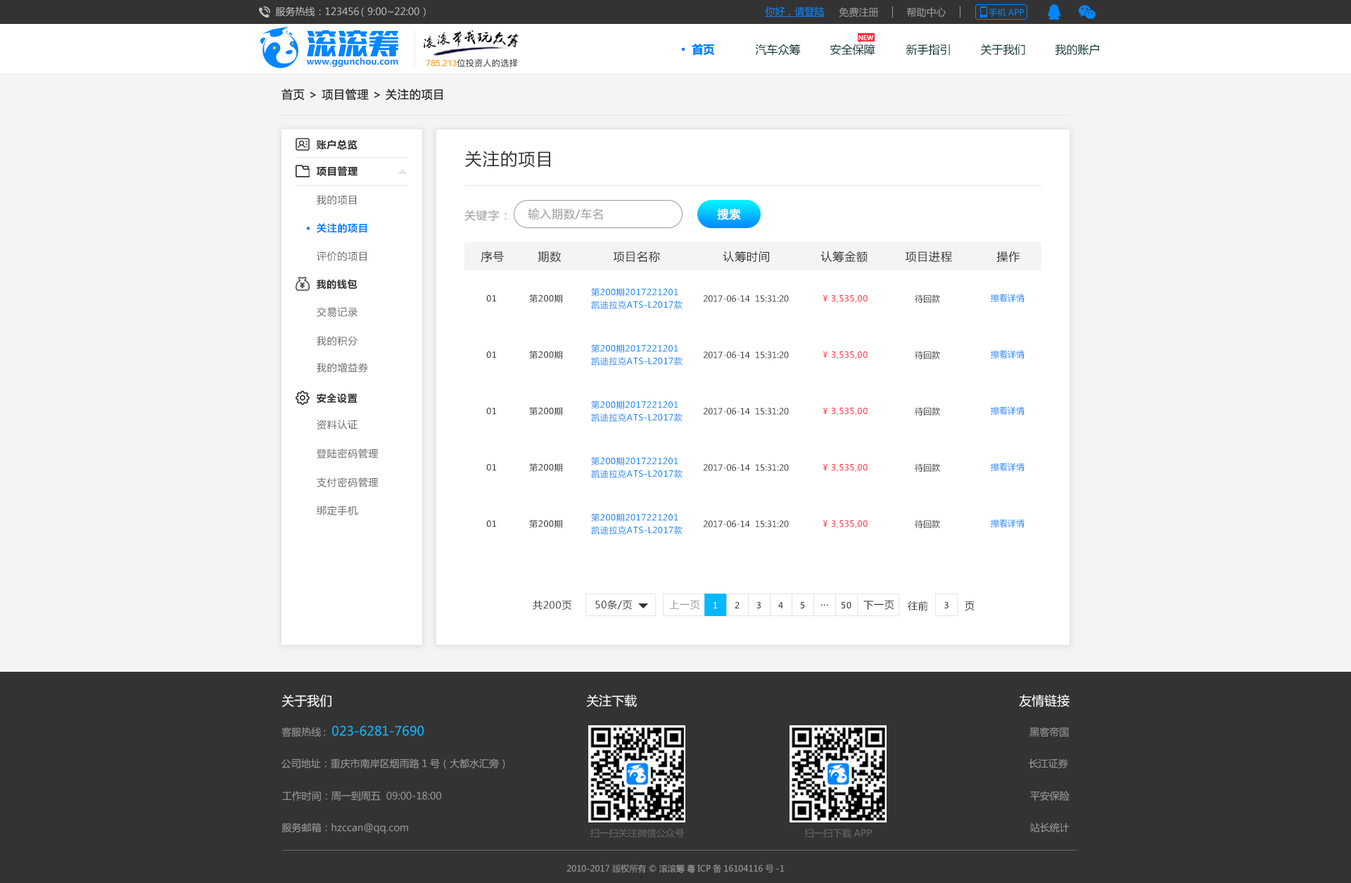
<style>
.page{position:relative;width:1351px;height:883px;background:#ffffff}
.page>*{position:absolute;margin:0}
.t1{font:9.9px "MicrosoftYaHei";color:#c4c4c4}
.t2{font:9.9px "MicrosoftYaHei";color:#0386ff;text-decoration:underline}
.t3{font:9.9px "MicrosoftYaHei";color:#999999}
.t4{font:8.4px "MicrosoftYaHei";color:#0386ff}
.t5{font:6.3px "MicrosoftYaHei";color:#ffffff}
.t6{font:11.3px "MicrosoftYaHei-Bold";color:#0386ff}
.t7{font:11.3px "MicrosoftYaHei";color:#033333}
.t8{font:8.8px "MicrosoftYaHei-Bold";color:#0386ff}
.t9{font:11.3px "MicrosoftYaHei";letter-spacing:0.05em;color:#333333}
.t10{font:9.9px "MicrosoftYaHei-Bold";letter-spacing:0.05em;color:#333333}
.t11{font:16.9px "MicrosoftYaHei";letter-spacing:0.05em;color:#333333}
.t12{font:9.9px "MicrosoftYaHei";letter-spacing:0.05em;color:#666666}
.t13{font:11.3px "MicrosoftYaHei";letter-spacing:0.05em;color:#999999}
.t14{font:11.3px "MicrosoftYaHei";letter-spacing:0.05em;color:#ffffff}
.t15{font:9.9px "MicrosoftYaHei-Bold";letter-spacing:0.05em;color:#0386ff}
.t16{font:8.4px/12.7px "MicrosoftYaHei";letter-spacing:0.05em;color:#0386ff}
.t17{font:8.4px "MicrosoftYaHei";letter-spacing:0.05em;color:#333333}
.t18{font:8.4px "MicrosoftYaHei";color:#333333}
.t19{font:8.4px "MicrosoftYaHei";letter-spacing:0.05em;color:#ff3140}
.t20{font:9.9px "MicrosoftYaHei";letter-spacing:0.05em;color:#333333}
.t21{font:9.9px "MicrosoftYaHei";letter-spacing:0.05em;color:#999999}
.t22{font:8.4px "MicrosoftYaHei";letter-spacing:0.05em;color:#ffffff}
.t23{font:8.4px "MicrosoftYaHei";letter-spacing:0.05em}
.t24{font:12.7px "MicrosoftYaHei";color:#fffefe}
.t25{font:12.7px "MicrosoftYaHei";color:#03b6ff}
.t26{font:9.4px "MicrosoftYaHei";color:#666666}
.t27{font:8.4px "MicrosoftYaHei";color:#999999}
</style>
<div class="page">
<p class="t1" style="left:275px;top:6px;width:151px;height:11px">服务热线：123456 （9:00~22:00）</p>
<p class="t2" style="left:765px;top:6px;width:60px;height:11px">你好，请登陆</p>
<p class="t3" style="left:839px;top:7px;width:40px;height:11px">免费注册</p>
<p class="t3" style="left:907px;top:7px;width:40px;height:11px">帮助中心</p>
<p class="t4" style="left:989px;top:8px;width:35px;height:9px">手机APP</p>
<p class="t5" style="left:859px;top:34px;width:15px;height:6px">NEW</p>
<p class="t6" style="left:692px;top:44px;width:23px;height:12px">首页</p>
<p class="t7" style="left:755px;top:44px;width:46px;height:12px">汽车众筹</p>
<p class="t7" style="left:830px;top:44px;width:45px;height:12px">安全保障</p>
<p class="t7" style="left:906px;top:44px;width:44px;height:12px">新手指引</p>
<p class="t7" style="left:980px;top:44px;width:45px;height:12px">关于我们</p>
<p class="t7" style="left:1055px;top:44px;width:44px;height:12px">我的账户</p>
<p class="t8" style="left:307px;top:57px;width:91px;height:10px">www.ggunchou.com</p>
<p class="t9" style="left:281px;top:89px;width:162px;height:12px">首页 &gt; 项目管理 &gt; 关注的项目</p>
<p class="t10" style="left:317px;top:139px;width:41px;height:11px">账户总览</p>
<p class="t11" style="left:465px;top:151px;width:85px;height:16px">关注的项目</p>
<p class="t10" style="left:317px;top:166px;width:41px;height:10px">项目管理</p>
<p class="t12" style="left:317px;top:195px;width:40px;height:10px">我的项目</p>
<p class="t13" style="left:464px;top:210px;width:43px;height:11px">关键字：</p>
<p class="t13" style="left:528px;top:208px;width:75px;height:12px">输入期数/车名</p>
<p class="t14" style="left:717px;top:208px;width:24px;height:12px">搜索</p>
<p class="t15" style="left:317px;top:223px;width:50px;height:10px">关注的项目</p>
<p class="t12" style="left:317px;top:251px;width:50px;height:10px">评价的项目</p>
<p class="t9" style="left:481px;top:251px;width:23px;height:11px">序号</p>
<p class="t9" style="left:538px;top:251px;width:24px;height:11px">期数</p>
<p class="t9" style="left:613px;top:251px;width:47px;height:11px">项目名称</p>
<p class="t9" style="left:723px;top:251px;width:46px;height:11px">认筹时间</p>
<p class="t9" style="left:821px;top:251px;width:47px;height:11px">认筹金额</p>
<p class="t9" style="left:905px;top:251px;width:47px;height:11px">项目进程</p>
<p class="t9" style="left:997px;top:251px;width:23px;height:11px">操作</p>
<p class="t10" style="left:317px;top:279px;width:41px;height:10px">我的钱包</p>
<p class="t16" style="left:591px;top:288px;width:92px;height:21px">第200期2017221201<br>凯迪拉克ATS-L2017款</p>
<p class="t4" style="left:991px;top:293px;width:34px;height:9px">擦看详情</p>
<p class="t17" style="left:486px;top:295px;width:11px;height:7px">01</p>
<p class="t17" style="left:529px;top:294px;width:33px;height:9px">第200期</p>
<p class="t18" style="left:703px;top:295px;width:86px;height:7px">2017-06-14  15:31:20</p>
<p class="t19" style="left:823px;top:295px;width:45px;height:8px">¥ 3,535,00</p>
<p class="t18" style="left:915px;top:294px;width:25px;height:9px">待回款</p>
<p class="t12" style="left:317px;top:307px;width:41px;height:10px">交易记录</p>
<p class="t12" style="left:317px;top:336px;width:41px;height:10px">我的积分</p>
<p class="t17" style="left:486px;top:351px;width:11px;height:7px">01</p>
<p class="t17" style="left:529px;top:350px;width:33px;height:9px">第200期</p>
<p class="t16" style="left:591px;top:344px;width:92px;height:21px">第200期2017221201<br>凯迪拉克ATS-L2017款</p>
<p class="t18" style="left:703px;top:351px;width:86px;height:7px">2017-06-14  15:31:20</p>
<p class="t19" style="left:823px;top:351px;width:45px;height:8px">¥ 3,535,00</p>
<p class="t18" style="left:915px;top:350px;width:25px;height:9px">待回款</p>
<p class="t4" style="left:991px;top:350px;width:34px;height:8px">擦看详情</p>
<p class="t12" style="left:317px;top:362px;width:51px;height:10px">我的增益券</p>
<p class="t10" style="left:317px;top:393px;width:41px;height:10px">安全设置</p>
<p class="t16" style="left:591px;top:400px;width:92px;height:22px">第200期2017221201<br>凯迪拉克ATS-L2017款</p>
<p class="t17" style="left:486px;top:407px;width:11px;height:8px">01</p>
<p class="t17" style="left:529px;top:407px;width:33px;height:8px">第200期</p>
<p class="t18" style="left:703px;top:407px;width:86px;height:8px">2017-06-14  15:31:20</p>
<p class="t19" style="left:823px;top:407px;width:45px;height:8px">¥ 3,535,00</p>
<p class="t18" style="left:915px;top:407px;width:25px;height:8px">待回款</p>
<p class="t4" style="left:991px;top:406px;width:34px;height:9px">擦看详情</p>
<p class="t12" style="left:317px;top:419px;width:41px;height:10px">资料认证</p>
<p class="t12" style="left:317px;top:448px;width:62px;height:10px">登陆密码管理</p>
<p class="t16" style="left:591px;top:457px;width:92px;height:21px">第200期2017221201<br>凯迪拉克ATS-L2017款</p>
<p class="t17" style="left:486px;top:464px;width:11px;height:7px">01</p>
<p class="t17" style="left:529px;top:463px;width:33px;height:9px">第200期</p>
<p class="t18" style="left:703px;top:464px;width:86px;height:7px">2017-06-14  15:31:20</p>
<p class="t19" style="left:823px;top:464px;width:45px;height:8px">¥ 3,535,00</p>
<p class="t18" style="left:915px;top:463px;width:25px;height:9px">待回款</p>
<p class="t4" style="left:991px;top:462px;width:34px;height:9px">擦看详情</p>
<p class="t12" style="left:317px;top:477px;width:62px;height:10px">支付密码管理</p>
<p class="t12" style="left:317px;top:505px;width:41px;height:10px">绑定手机</p>
<p class="t17" style="left:486px;top:520px;width:11px;height:7px">01</p>
<p class="t17" style="left:529px;top:519px;width:33px;height:9px">第200期</p>
<p class="t16" style="left:591px;top:513px;width:92px;height:21px">第200期2017221201<br>凯迪拉克ATS-L2017款</p>
<p class="t18" style="left:703px;top:520px;width:86px;height:7px">2017-06-14  15:31:20</p>
<p class="t19" style="left:823px;top:520px;width:45px;height:8px">¥ 3,535,00</p>
<p class="t18" style="left:915px;top:519px;width:25px;height:9px">待回款</p>
<p class="t4" style="left:991px;top:519px;width:34px;height:8px">擦看详情</p>
<p class="t20" style="left:533px;top:600px;width:38px;height:10px">共200页</p>
<p class="t20" style="left:595px;top:600px;width:37px;height:9px">50条/页</p>
<p class="t21" style="left:669px;top:600px;width:31px;height:9px">上一页</p>
<p class="t22" style="left:714px;top:601px;width:4px;height:7px">1</p>
<p class="t17" style="left:735px;top:601px;width:5px;height:7px">2</p>
<p class="t17" style="left:757px;top:601px;width:4px;height:8px">3</p>
<p class="t17" style="left:778px;top:601px;width:5px;height:7px">4</p>
<p class="t17" style="left:801px;top:601px;width:4px;height:8px">5</p>
<p class="t20" style="left:821px;top:604px;width:7px;height:2px">...</p>
<p class="t17" style="left:842px;top:601px;width:10px;height:8px">50</p>
<p class="t20" style="left:863px;top:600px;width:31px;height:9px">下一页</p>
<p class="t20" style="left:908px;top:600px;width:20px;height:11px">往前</p>
<p class="t23" style="left:944px;top:601px;width:5px;height:8px">3</p>
<p class="t20" style="left:965px;top:601px;width:10px;height:10px">页</p>
<p class="t24" style="left:281px;top:694px;width:50px;height:13px">关于我们</p>
<p class="t24" style="left:586px;top:694px;width:51px;height:13px">关注下载</p>
<p class="t24" style="left:1019px;top:694px;width:51px;height:13px">友情链接</p>
<p class="t25" style="left:281px;top:725px;width:143px;height:12px"><span class="t3">客服热线:  </span>023-6281-7690</p>
<p class="t3" style="left:1030px;top:726px;width:39px;height:11px">黑客帝国</p>
<p class="t3" style="left:281px;top:758px;width:224px;height:10px">公司地址：重庆市南岸区烟雨路1号（大都水汇旁）</p>
<p class="t3" style="left:1029px;top:758px;width:39px;height:10px">长江证券</p>
<p class="t3" style="left:282px;top:790px;width:159px;height:11px">工作时间：周一到周五  09:00-18:00</p>
<p class="t3" style="left:1030px;top:790px;width:40px;height:10px">平安保险</p>
<p class="t3" style="left:281px;top:822px;width:127px;height:11px">服务邮箱：hzccan@qq.com</p>
<p class="t3" style="left:1030px;top:822px;width:40px;height:10px">站长统计</p>
<p class="t26" style="left:590px;top:828px;width:95px;height:9px">扫一扫关注微信公众号</p>
<p class="t26" style="left:804px;top:828px;width:68px;height:9px">扫一扫下载APP</p>
<p class="t27" style="left:567px;top:863px;width:218px;height:10px">2010-2017 版权所有 © 滚滚筹 粤ICP备16104116号-1</p>
</div>
